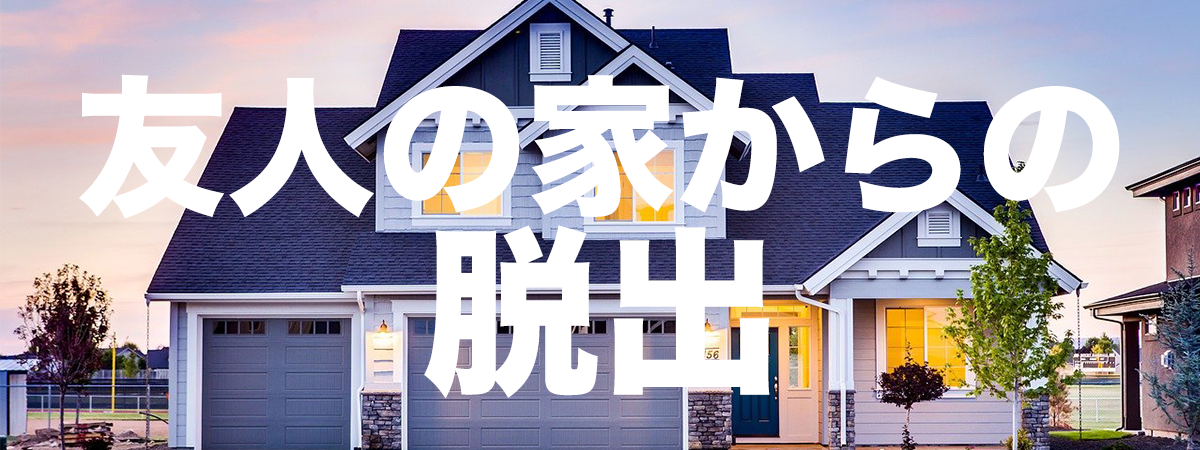
<style>
.page{position:relative;width:1200px;height:450px}
.page>*{position:absolute;margin:0}
.t1{font:150px/150px "HiraKakuStd-W8";color:#ffffff}
.t2{font:180px/150px "HiraKakuStd-W8";color:#ffffff}
</style>
<div class="page">
<p class="t1" style="left:79px;top:74px;width:1041px;height:325px;text-align:center">友人の家からの<span class="t2">脱出</span></p>
</div>
